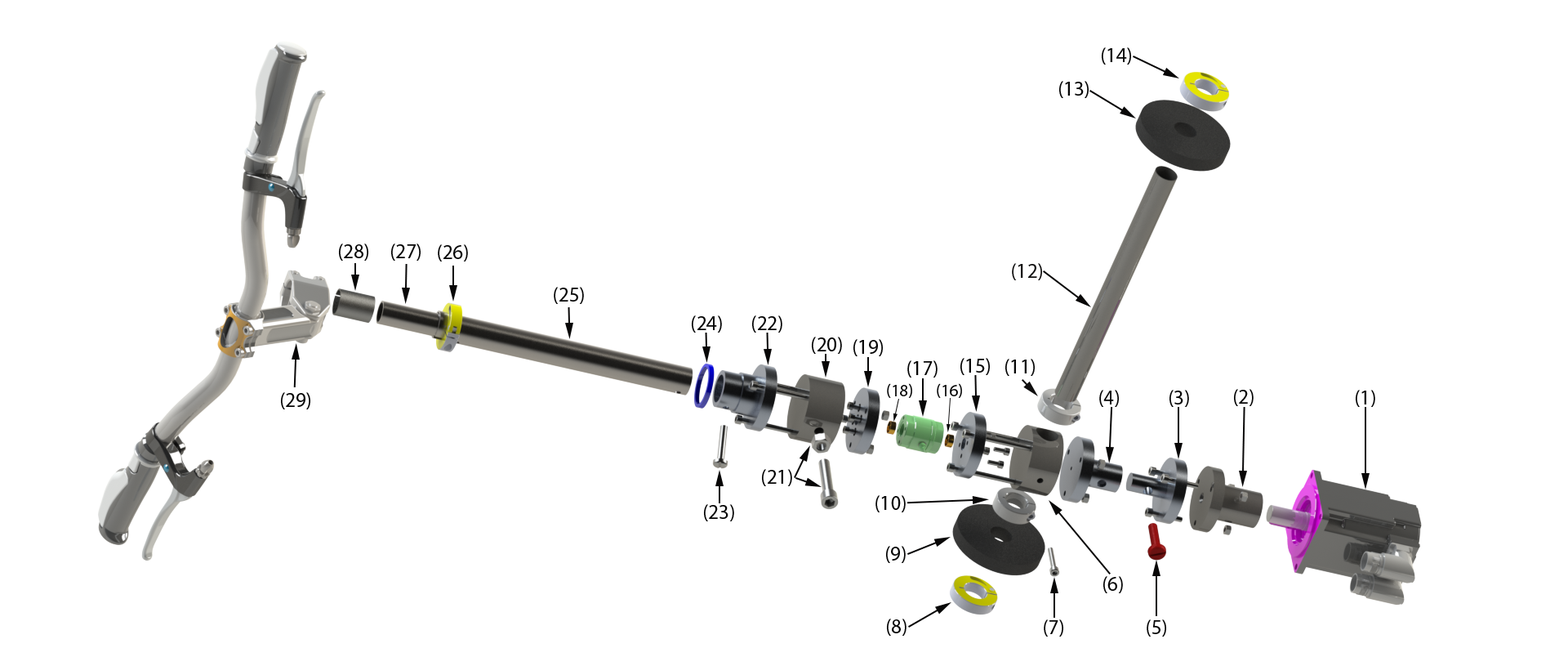
<style>
.page{position:relative;width:1568px;height:657px;background:#ffffff}
.page>*{position:absolute;margin:0}
.t1{font:20.4px "MyriadPro-Regular";color:#040404}
.t2{font:20.4px "MyriadPro-Regular";color:#0f0e0e}
.t3{font:17px "MyriadPro-Regular";color:#040404}
</style>
<div class="page">
<p class="t1" style="left:1102px;top:47px;width:29px;height:18px">(14)</p>
<p class="t1" style="left:1059px;top:81px;width:30px;height:17px">(13)</p>
<p class="t1" style="left:339px;top:243px;width:29px;height:18px">(28)</p>
<p class="t1" style="left:391px;top:243px;width:30px;height:18px">(27)</p>
<p class="t1" style="left:438px;top:244px;width:30px;height:17px">(26)</p>
<p class="t2" style="left:1012px;top:263px;width:30px;height:17px">(12)</p>
<p class="t1" style="left:554px;top:287px;width:30px;height:17px">(25)</p>
<p class="t1" style="left:692px;top:315px;width:30px;height:17px">(24)</p>
<p class="t1" style="left:752px;top:315px;width:30px;height:17px">(22)</p>
<p class="t1" style="left:812px;top:336px;width:30px;height:18px">(20)</p>
<p class="t1" style="left:853px;top:339px;width:30px;height:17px">(19)</p>
<p class="t1" style="left:907px;top:360px;width:31px;height:17px">(17)</p>
<p class="t1" style="left:960px;top:358px;width:30px;height:17px">(15)</p>
<p class="t1" style="left:1005px;top:359px;width:30px;height:17px">(11)</p>
<p class="t3" style="left:887px;top:383px;width:25px;height:15px">(18)</p>
<p class="t3" style="left:937px;top:383px;width:25px;height:15px">(16)</p>
<p class="t1" style="left:1099px;top:390px;width:20px;height:17px">(4)</p>
<p class="t1" style="left:1169px;top:390px;width:20px;height:17px">(3)</p>
<p class="t1" style="left:1234px;top:389px;width:20px;height:17px">(2)</p>
<p class="t1" style="left:1356px;top:390px;width:19px;height:17px">(1)</p>
<p class="t1" style="left:281px;top:392px;width:29px;height:17px">(29)</p>
<p class="t1" style="left:762px;top:469px;width:30px;height:17px">(21)</p>
<p class="t1" style="left:875px;top:495px;width:31px;height:17px">(10)</p>
<p class="t1" style="left:704px;top:504px;width:30px;height:17px">(23)</p>
<p class="t1" style="left:886px;top:546px;width:20px;height:17px">(9)</p>
<p class="t1" style="left:1103px;top:576px;width:20px;height:17px">(6)</p>
<p class="t1" style="left:887px;top:618px;width:19px;height:17px">(8)</p>
<p class="t1" style="left:1044px;top:619px;width:19px;height:17px">(7)</p>
<p class="t1" style="left:1147px;top:619px;width:19px;height:17px">(5)</p>
</div>
